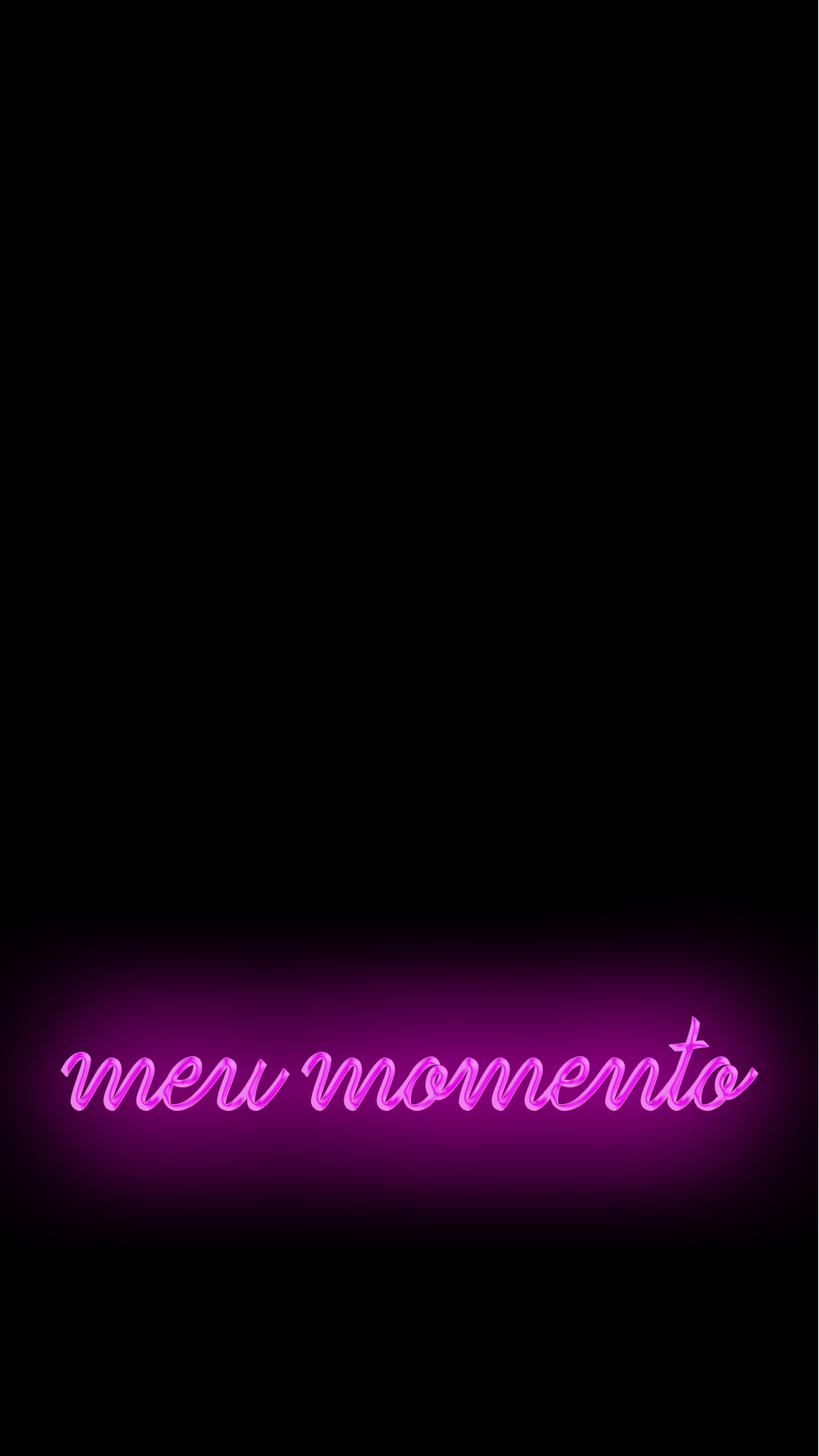
<style>
.page{position:relative;width:819px;height:1456px;background:#000000}
.page>*{position:absolute;margin:0}
.t1{font:125.3px "Ribbons-Regular"}
</style>
<div class="page">
<p class="t1" style="left:61px;top:1016px;width:697px;height:94px">meu momento</p>
</div>
